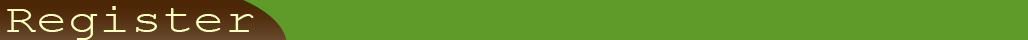
<style>
.page{position:relative;width:1028px;height:40px;background:#5e9b29}
.page>*{position:absolute;margin:0}
.t1{font:40.3px "CourierNewPSMT";color:#ffffbe;scale:1.3 1}
</style>
<div class="page">
<p class="t1" style="left:7px;top:6px;width:247px;height:34px">Register</p>
</div>
